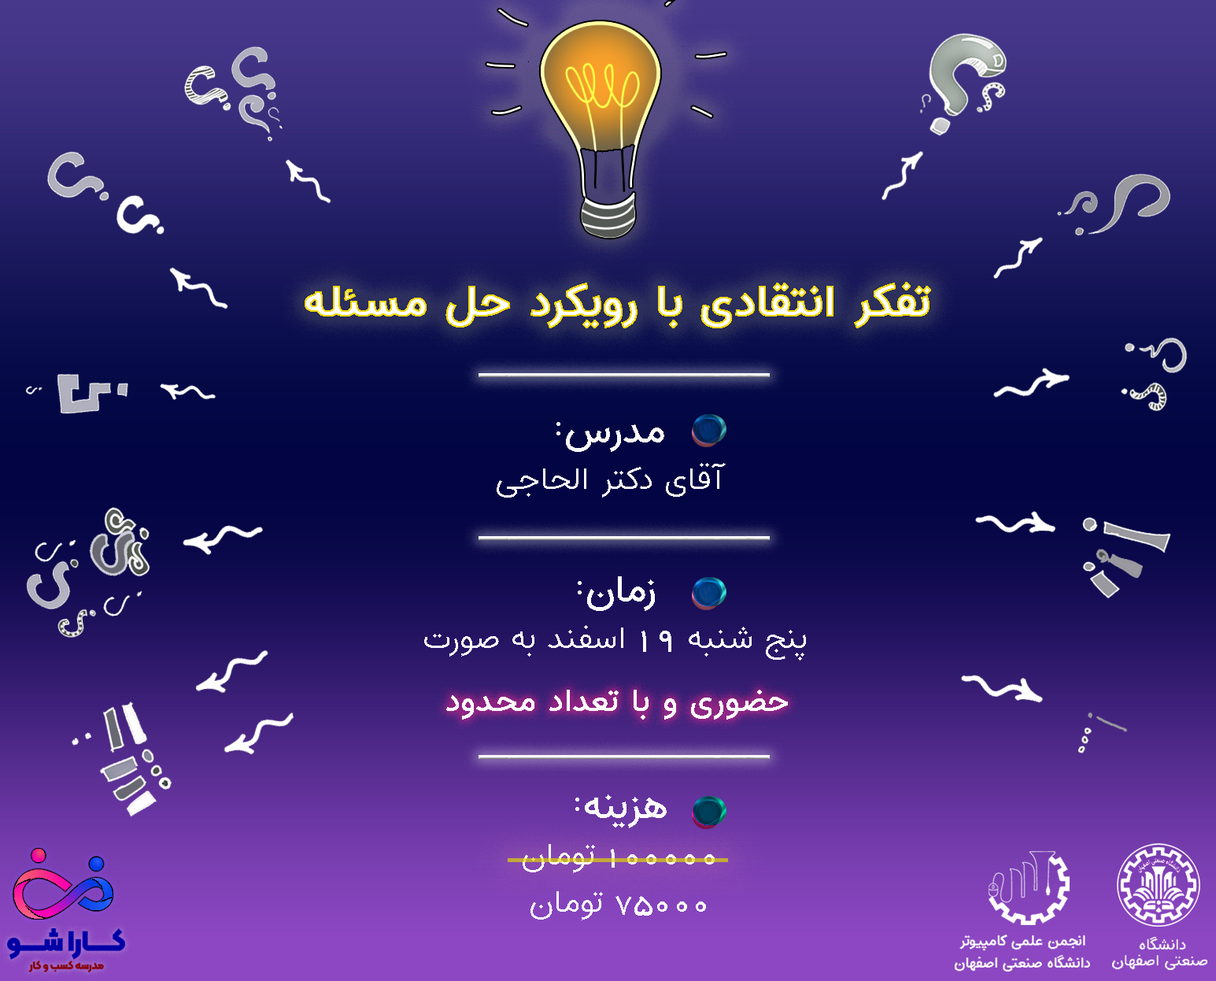
<style>
.page{position:relative;width:1216px;height:981px}
.page>*{position:absolute;margin:0}
.t1{font:45.9px "Estedad-Bold";font-weight:bold}
.t2{font:42.6px "Estedad-Bold";font-weight:bold}
.t3{font:32.8px/47.2px "Estedad-Light";color:#fbfbfa}
.t4{font:39.4px/47.2px "Estedad-Medium";color:#fbfbfa}
.t5{font:32.8px/47.2px "Estedad-Light";color:#fcfcfc}
.t6{font:39.4px/47.2px "Estedad-Medium";color:#fcfcfc}
.t7{font:36.1px/47.2px "2--Yekan";color:#fcfcfc}
.t8{font:32.8px "Estedad-Light";color:#fcfcfc;font-weight:bold}
.t9{font:32.8px/47.2px "2--Yekan";color:#f9f5f4}
.t10{font:32.8px/47.2px "2--Yekan";color:#fcfcfc}
</style>
<div class="page">
<p class="t1" style="left:305px;top:282px;width:626px;height:46px"><span class="t2">       </span>تفکر انتقادی با رویکرد حل مسئله</p>
<p class="t3" style="left:497px;top:422px;width:229px;height:75px;text-align:center"><span class="t4">مدرس:<br></span>آقای دکتر الحاجی</p>
<p class="t5" style="left:424px;top:576px;width:382px;height:84px;text-align:center"><span class="t6">زمان: <br></span>پنج شنبه <span class="t7">19 </span>اسفند به صورت</p>
<p class="t8" style="left:446px;top:689px;width:342px;height:30px">حضوری و با تعداد محدود</p>
<p class="t6" style="left:523px;top:794px;width:192px;height:126px;text-align:center">هزینه:<br><span class="t9">100000 </span><span class="t5">تومان<br></span><span class="t10">75000</span><span class="t5"> تومان</span></p>
</div>
